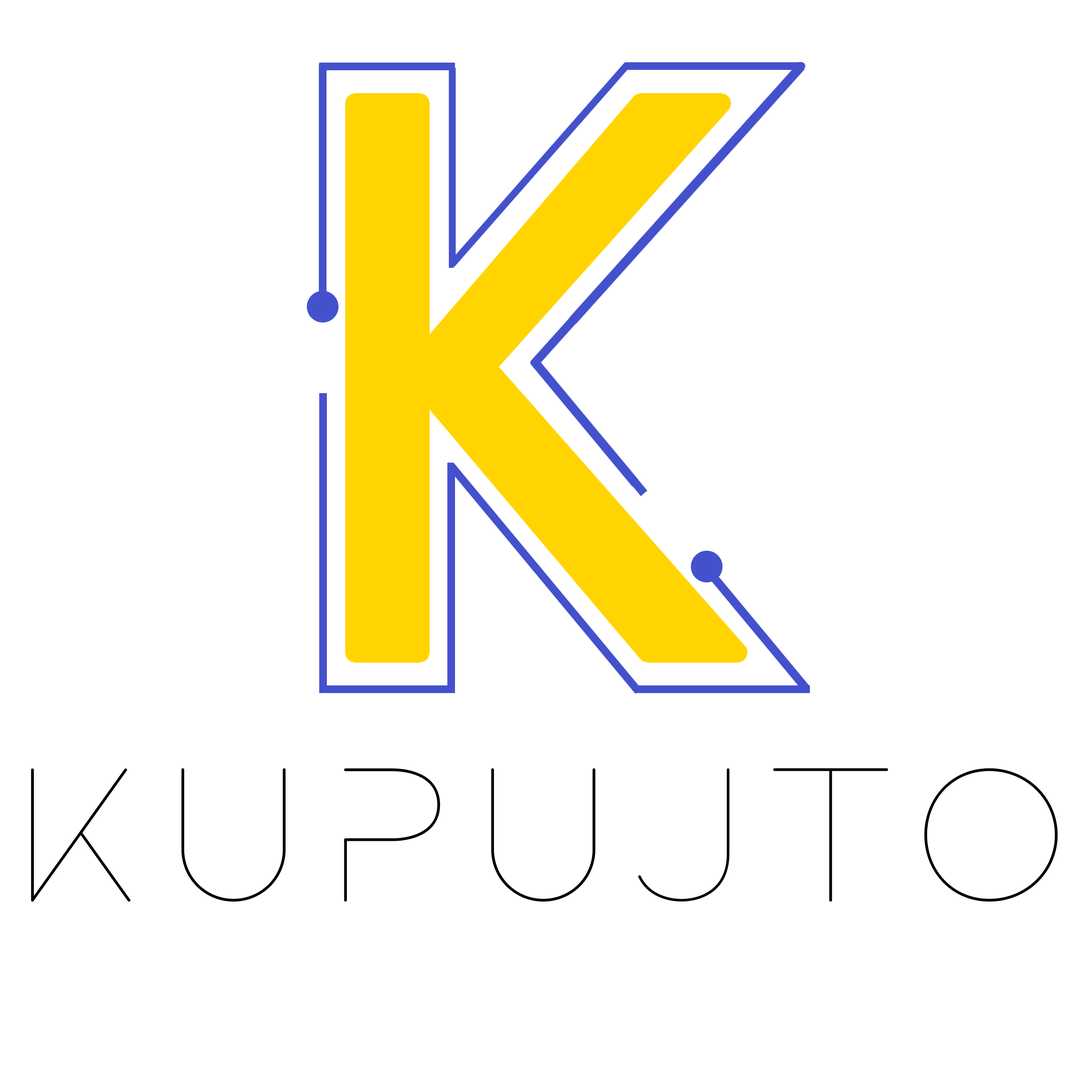
<style>
.page{position:relative;width:1092px;height:1092px;background:#ffffff}
.page>*{position:absolute;margin:0}
.t1{font:784.8px "SegoeUIHistoric";color:#ffd400}
.t2{font:209px "ROCKETWILDNESS";color:#000000}
</style>
<div class="page">
<p class="t1" style="left:355px;top:103px;width:383px;height:550px">K</p>
<p class="t2" style="left:31px;top:768px;width:1027px;height:134px">KupujTo</p>
</div>
